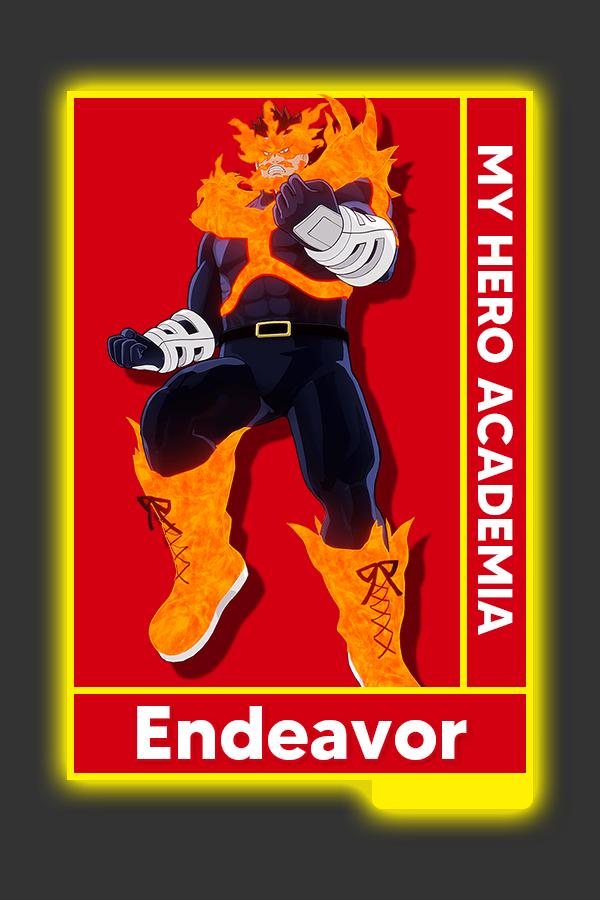
<style>
.page{position:relative;width:600px;height:900px;background:#d20010}
.page>*{position:absolute;margin:0}
.t1{font:48.8px "MADETOMMY-Bold";color:#ffffff}
.t2{font:75px "MADETOMMY-Bold";color:#ffffff}
</style>
<div class="page">
<p class="t1" style="left:477px;top:146px;width:36px;height:489px;rotate:90deg">MY HERO ACADEMIA</p>
<p class="t2" style="left:137px;top:706px;width:330px;height:54px">Endeavor</p>
</div>
